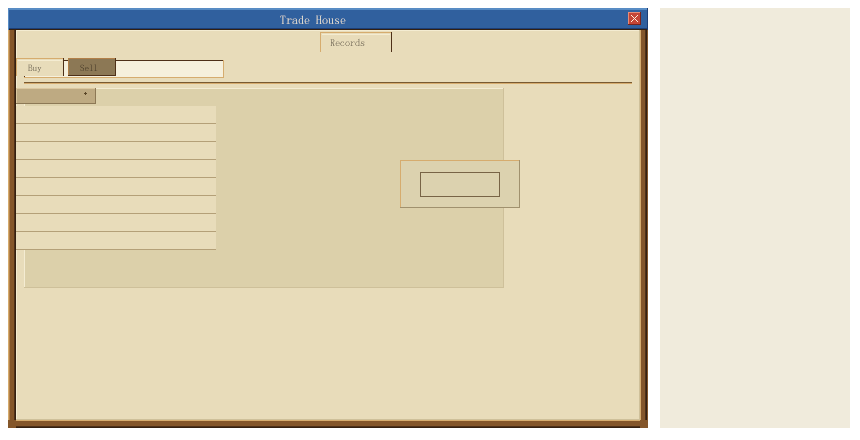
<style>
.page{position:relative;width:860px;height:440px;background:#e8dcba}
.page>*{position:absolute;margin:0}
.t1{font:12px "SimSun"}
.t2{font:10px "SimSun"}
.t3{font:9px "SimSun"}
</style>
<div class="page">
<p class="t1" style="left:280px;top:15px;width:66px;height:9px">Trade House</p>
<p class="t2" style="left:330px;top:38px;width:35px;height:8px">Records</p>
<p class="t3" style="left:28px;top:64px;width:14px;height:9px">Buy</p>
<p class="t3" style="left:80px;top:64px;width:18px;height:7px">Sell</p>
</div>
